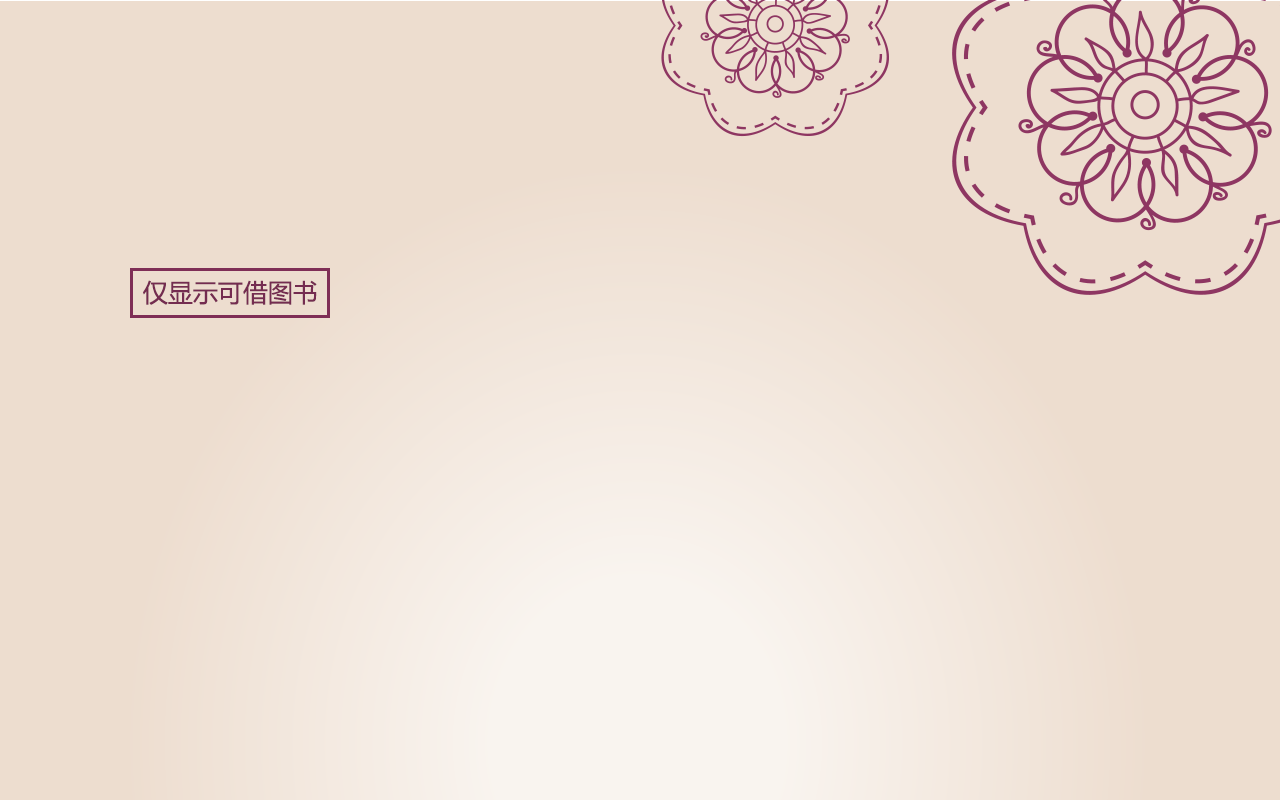
<style>
.page{position:relative;width:1280px;height:800px;background:#edddcf}
.page>*{position:absolute;margin:0}
.t1{font:25px "MicrosoftYaHei";color:#742c50}
</style>
<div class="page">
<p class="t1" style="left:143px;top:280px;width:174px;height:25px">仅显示可借图书</p>
</div>
